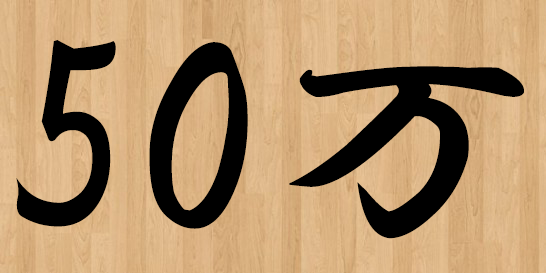
<style>
.page{position:relative;width:546px;height:273px}
.page>*{position:absolute;margin:0}
.t1{font:274.1px "HGPGyoshotai";color:#000000}
</style>
<div class="page">
<p class="t1" style="left:16px;top:40px;width:508px;height:199px">50万</p>
</div>
